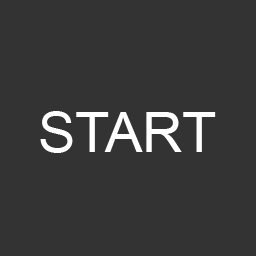
<style>
.page{position:relative;width:256px;height:256px;background:#333333}
.page>*{position:absolute;margin:0}
.t1{font:55.8px "ArialMT";color:#ffffff}
</style>
<div class="page">
<p class="t1" style="left:40px;top:111px;width:176px;height:42px">START</p>
</div>
